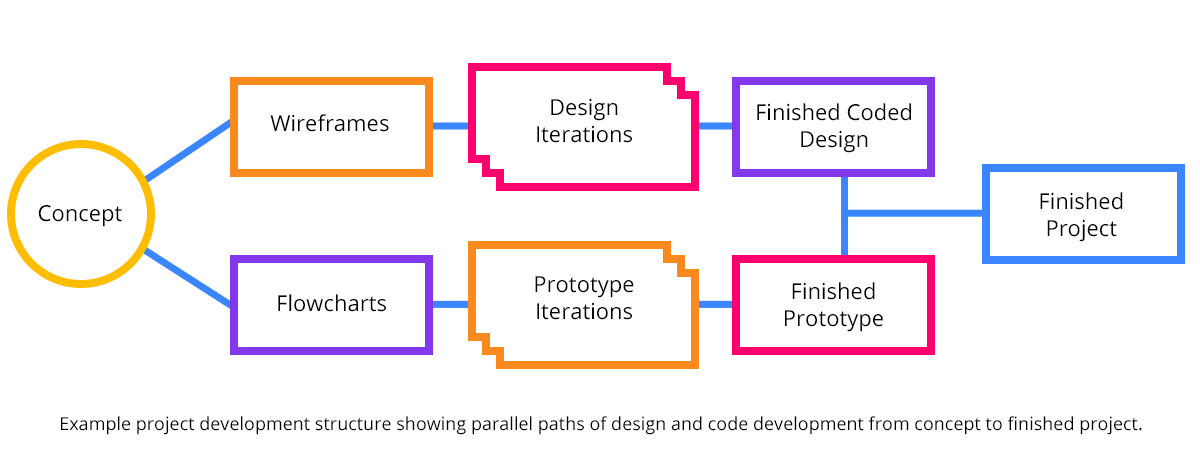
<style>
.page{position:relative;width:1200px;height:450px;background:#ffffff}
.page>*{position:absolute;margin:0}
.t1{font:22px "OpenSans-Regular";color:#000000}
.t2{font:18px "OpenSans-Regular";color:#000000}
</style>
<div class="page">
<p class="t1" style="left:537px;top:98px;width:95px;height:45px;text-align:center">Design Iterations</p>
<p class="t1" style="left:757px;top:103px;width:154px;height:50px;text-align:center">Finished Coded Design</p>
<p class="t1" style="left:270px;top:114px;width:119px;height:18px">Wireframes</p>
<p class="t1" style="left:1040px;top:192px;width:83px;height:50px;text-align:center">Finished Project</p>
<p class="t1" style="left:38px;top:205px;width:84px;height:22px">Concept</p>
<p class="t1" style="left:535px;top:276px;width:99px;height:44px;text-align:center">Prototype Iterations</p>
<p class="t1" style="left:278px;top:294px;width:108px;height:18px">Flowcharts</p>
<p class="t1" style="left:785px;top:282px;width:98px;height:50px;text-align:center">Finished Prototype</p>
<p class="t2" style="left:61px;top:416px;width:1081px;height:19px">Example project development structure showing parallel paths of design and code development from concept to finished project.</p>
</div>
